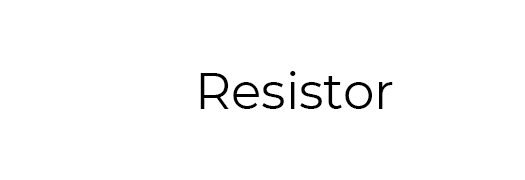
<style>
.page{position:relative;width:525px;height:180px;background:#ffffff}
.page>*{position:absolute;margin:0}
.t1{font:50px "Montserrat-Regular";color:#000000}
</style>
<div class="page">
<p class="t1" style="left:200px;top:71px;width:193px;height:38px">Resistor</p>
</div>
